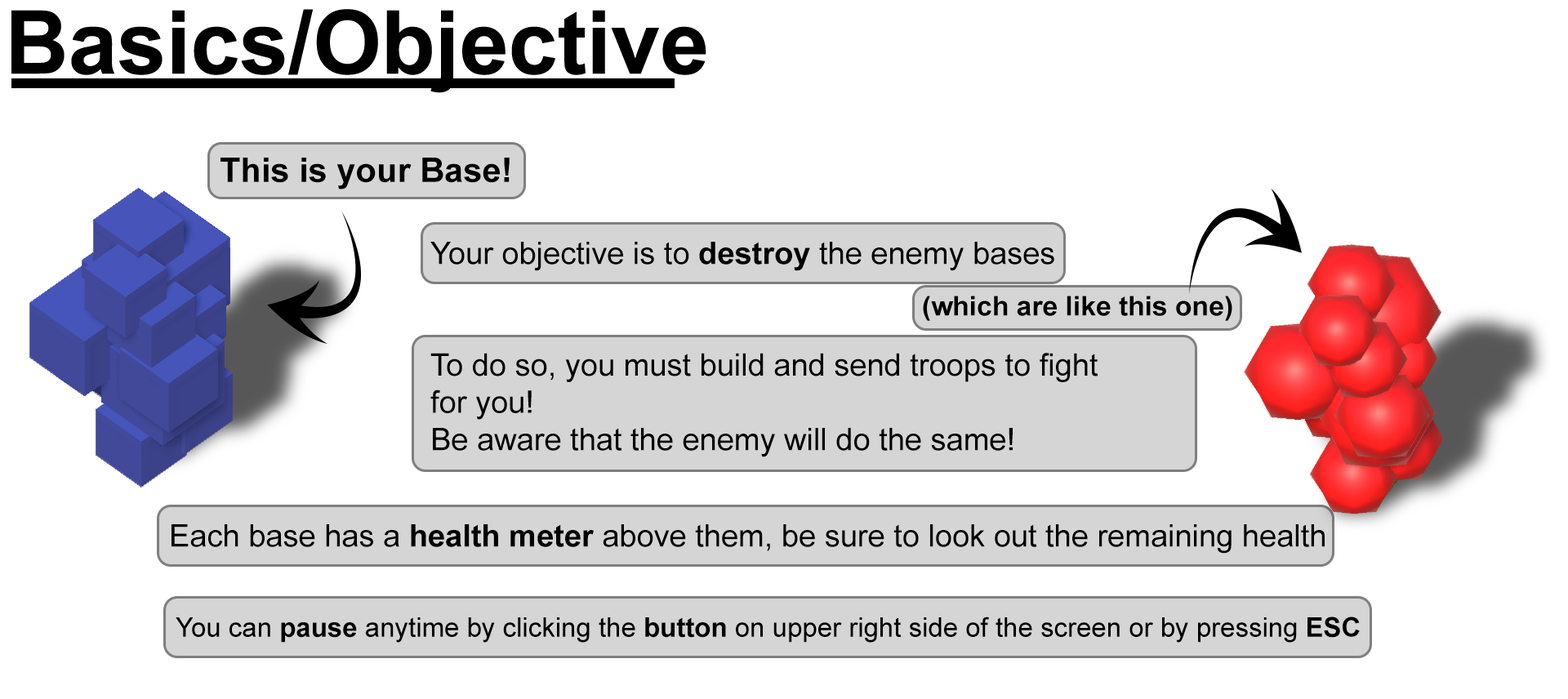
<style>
.page{position:relative;width:1568px;height:699px;background:#ffffff}
.page>*{position:absolute;margin:0}
.t1{font:87.9px "Arial-BoldMT";color:#000000}
.t2{font:33.8px "Arial-BoldMT";color:#000000}
.t3{font:31px "ArialMT";color:#000000}
.t4{font:31px "Arial-BoldMT";color:#000000}
.t5{font:26.9px "Arial-BoldMT";color:#000000}
.t6{font:26.9px "ArialMT";color:#000000}
</style>
<div class="page">
<p class="t1" style="left:11px;top:9px;width:695px;height:84px">Basics/Objective</p>
<p class="t2" style="left:220px;top:158px;width:290px;height:31px">This is your Base!</p>
<p class="t3" style="left:430px;top:242px;width:668px;height:215px">Your objective is to <span class="t4">destroy</span> the enemy bases<br><br><br>To do so, you must build and send troops to fight for you!<br>Be aware that the enemy will do the same!</p>
<p class="t5" style="left:923px;top:296px;width:309px;height:25px">(which are like this one)</p>
<p class="t3" style="left:172px;top:524px;width:1153px;height:30px">Each base has a <span class="t4">health meter</span> above them, be sure to look out the remaining health</p>
<p class="t6" style="left:176px;top:617px;width:1184px;height:26px">You can <span class="t5">pause</span> anytime by clicking the <span class="t5">button</span> on upper right side of the screen or by pressing <span class="t5">ESC</span></p>
</div>
